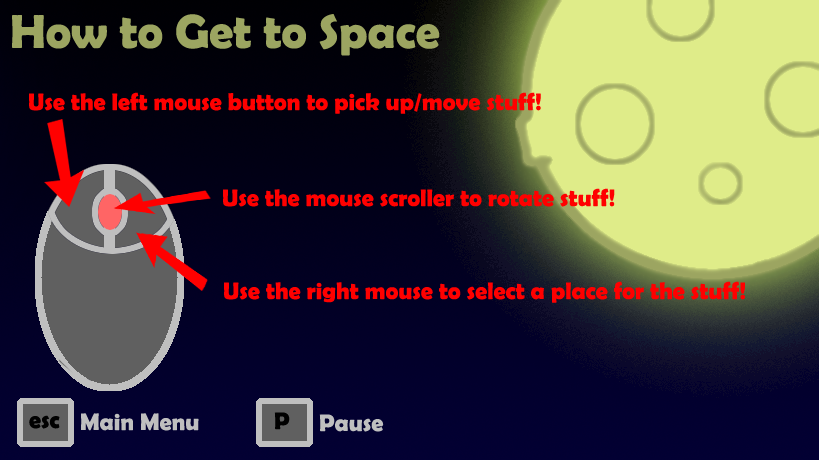
<style>
.page{position:relative;width:819px;height:460px}
.page>*{position:absolute;margin:0}
.t1{font:48px "BerlinSansFBDemi-Bold";color:#9ca561}
.t2{font:24px "BerlinSansFBDemi-Bold";color:#ff0000}
.t3{font:24px "BerlinSansFBDemi-Bold";color:#bfbfbf}
.t4{font:24px "BerlinSansFBDemi-Bold";color:#000000}
.t5{font:24px "BerlinSansFBDemi-Bold";color:#010101}
</style>
<div class="page">
<p class="t1" style="left:12px;top:14px;width:428px;height:42px">How to Get to Space</p>
<p class="t2" style="left:29px;top:92px;width:512px;height:22px">Use the left mouse button to pick up/move stuff!</p>
<p class="t2" style="left:224px;top:281px;width:521px;height:22px">Use the right mouse to select a place for the stuff!</p>
<p class="t3" style="left:81px;top:413px;width:118px;height:18px">Main Menu</p>
<p class="t4" style="left:274px;top:412px;width:16px;height:18px">P</p>
<p class="t3" style="left:319px;top:414px;width:65px;height:18px">Pause</p>
<p class="t5" style="left:29px;top:415px;width:31px;height:14px">esc</p>
</div>
